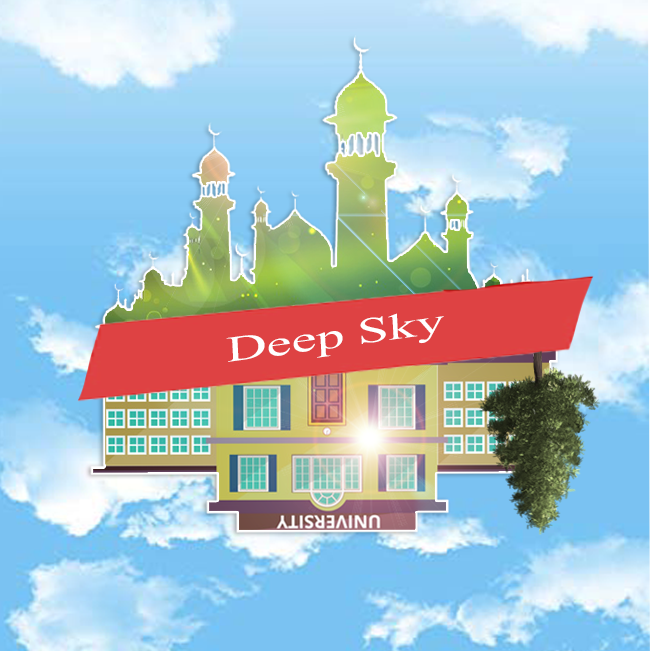
<style>
.page{position:relative;width:650px;height:651px}
.page>*{position:absolute;margin:0}
.t1{font:36px "TimesNewRomanPSMT";color:#ffffff;scale:1.57 1}
</style>
<div class="page">
<p class="t1" style="left:226px;top:313px;width:218px;height:49px;rotate:-8deg">Deep Sky</p>
</div>
